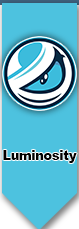
<style>
.page{position:relative;width:79px;height:229px;background:#4dc2df}
.page>*{position:absolute;margin:0}
.t1{font:12.5px "Arial-Black";letter-spacing:-0.01em;color:#000000}
</style>
<div class="page">
<p class="t1" style="left:3px;top:150px;width:74px;height:13px">Luminosity</p>
</div>
